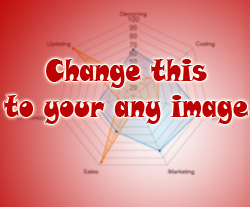
<style>
.page{position:relative;width:250px;height:207px}
.page>*{position:absolute;margin:0}
.t1{font:30px "SnapITC-Regular";color:#bc0202;scale:0.8 1}
</style>
<div class="page">
<p class="t1" style="left:4px;top:59px;width:244px;height:65px;text-align:center">Change this<br>to your any image</p>
</div>
